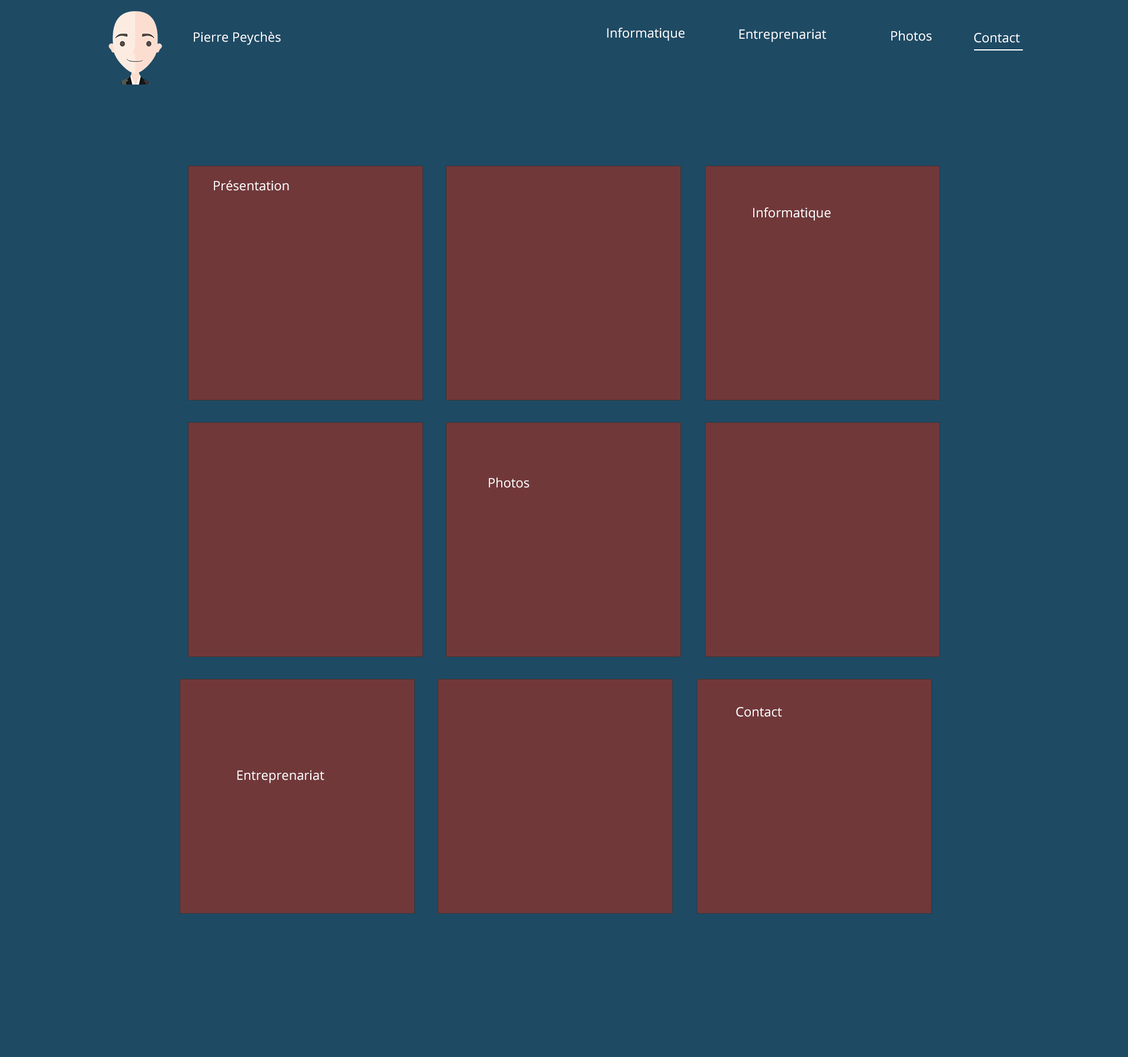
<style>
.page{position:relative;width:1128px;height:1057px;background:#1e4a64}
.page>*{position:absolute;margin:0}
.t1{font:12.9px "OpenSans";color:#ffffff}
</style>
<div class="page">
<p class="t1" style="left:607px;top:28px;width:77px;height:13px">Informatique</p>
<p class="t1" style="left:739px;top:29px;width:87px;height:13px">Entreprenariat</p>
<p class="t1" style="left:194px;top:32px;width:87px;height:13px">Pierre Peychès</p>
<p class="t1" style="left:891px;top:31px;width:41px;height:10px">Photos</p>
<p class="t1" style="left:974px;top:33px;width:46px;height:10px">Contact</p>
<p class="t1" style="left:214px;top:180px;width:75px;height:11px">Présentation</p>
<p class="t1" style="left:753px;top:207px;width:78px;height:14px">Informatique</p>
<p class="t1" style="left:489px;top:478px;width:40px;height:10px">Photos</p>
<p class="t1" style="left:736px;top:707px;width:46px;height:10px">Contact</p>
<p class="t1" style="left:237px;top:770px;width:87px;height:14px">Entreprenariat</p>
</div>
